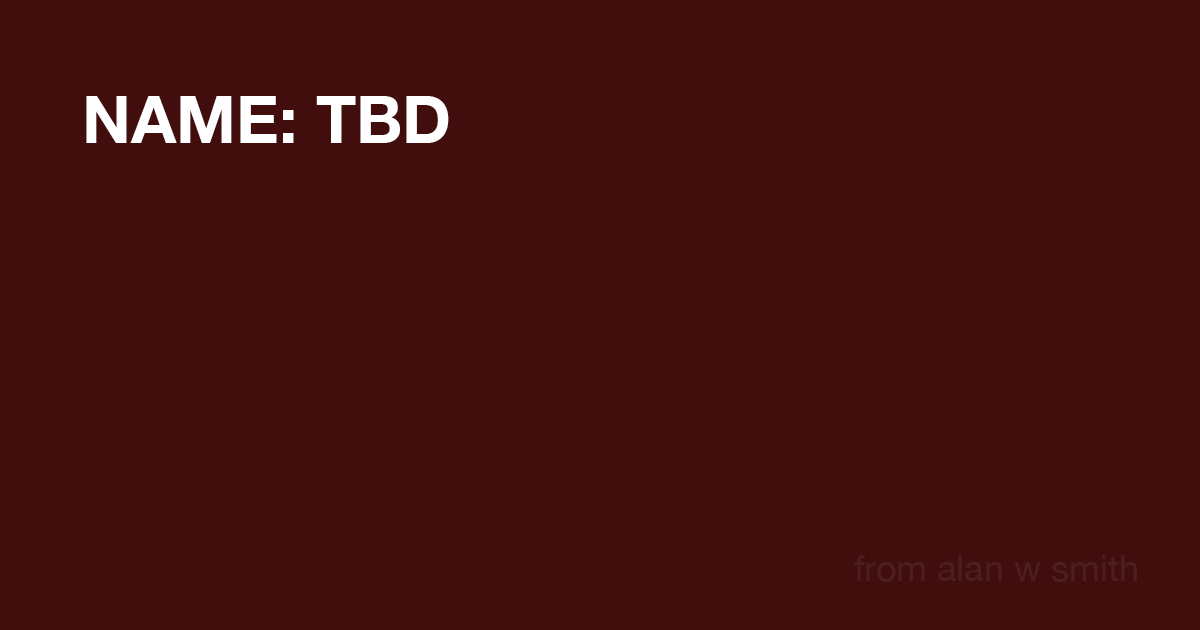
<style>
.page{position:relative;width:1200px;height:630px;background:#420d0d}
.page>*{position:absolute;margin:0}
.t1{font:66px "HelveticaNeue-Bold";color:#ffffff}
.t2{font:36px "HelveticaNeue";color:#4c1e1e}
</style>
<div class="page">
<p class="t1" style="left:86px;top:96px;width:363px;height:47px">NAME: TBD</p>
<p class="t2" style="left:854px;top:555px;width:283px;height:27px">from alan w smith</p>
</div>
